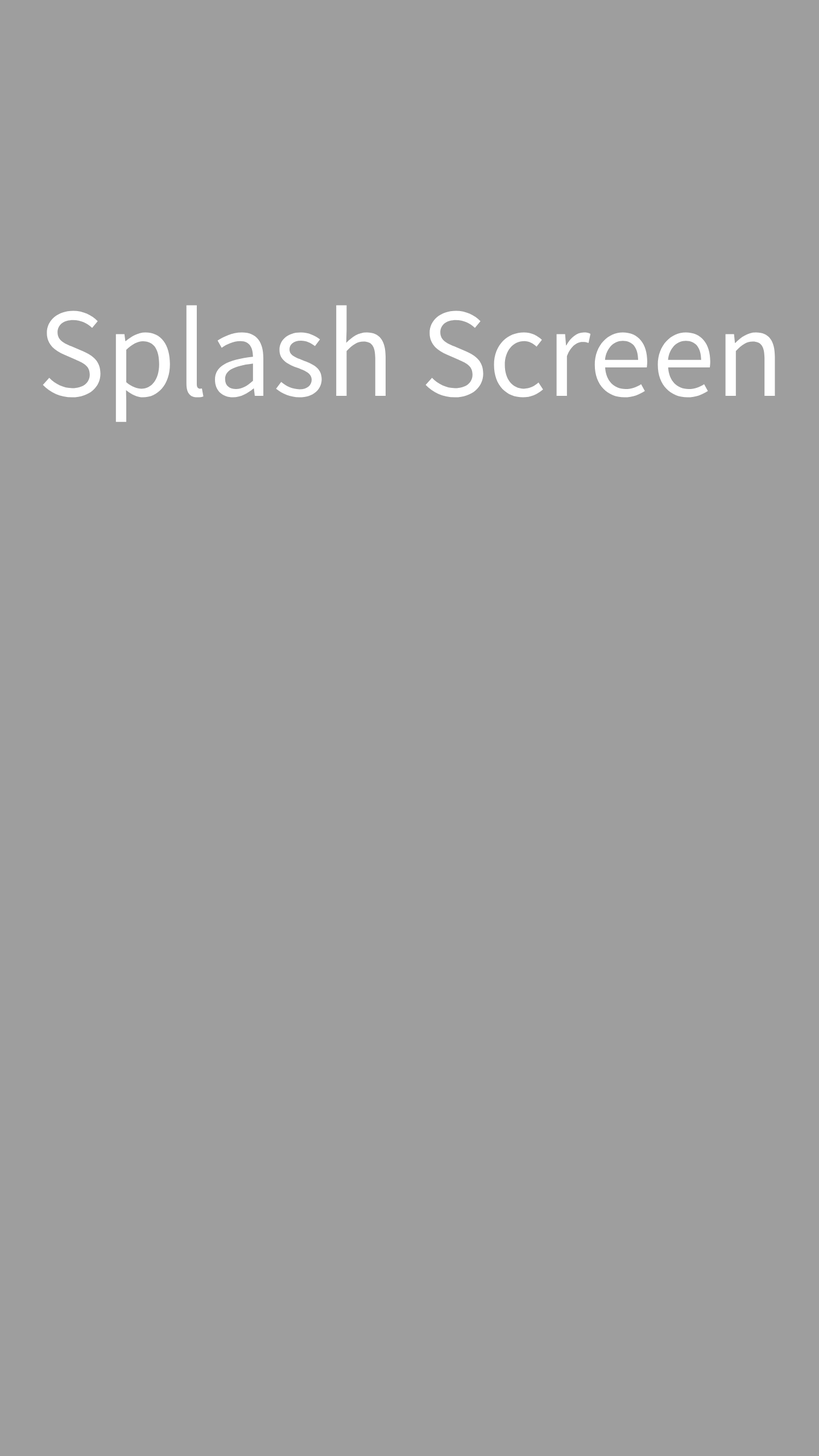
<style>
.page{position:relative;width:819px;height:1456px;background:#9e9e9e}
.page>*{position:absolute;margin:0}
.t1{font:113.7px "NotoSansKR-Regular";color:#ffffff}
</style>
<div class="page">
<p class="t1" style="left:43px;top:305px;width:732px;height:117px">Splash Screen</p>
</div>
